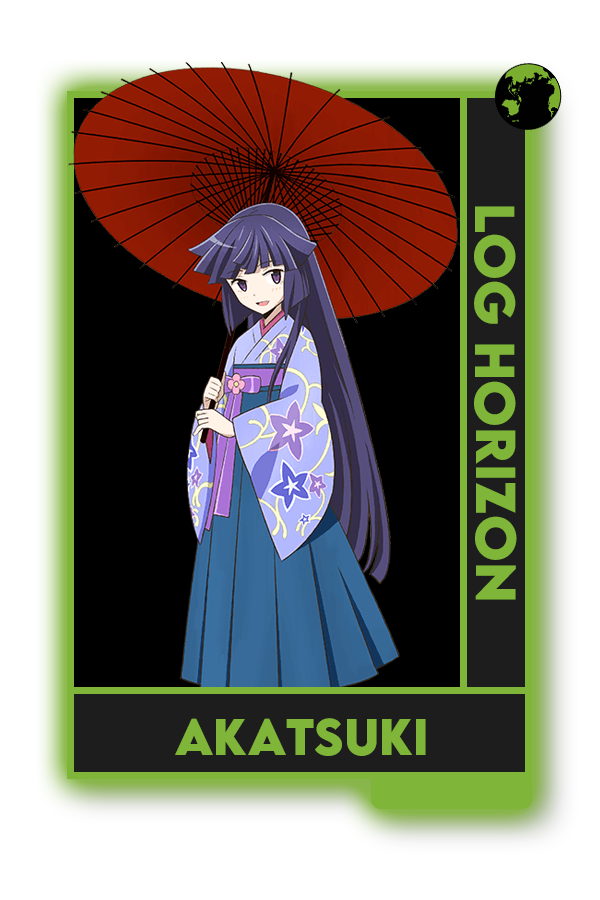
<style>
.page{position:relative;width:600px;height:900px;background:#ffffff}
.page>*{position:absolute;margin:0}
.t1{font:50px "LEMONMILK-Bold";color:#7fad41}
.t2{font:45.8px "LEMONMILK-Bold";color:#7fad41}
</style>
<div class="page">
<p class="t1" style="left:474px;top:206px;width:43px;height:394px;rotate:90deg">Log Horizon</p>
<p class="t2" style="left:175px;top:718px;width:251px;height:38px">Akatsuki</p>
</div>
